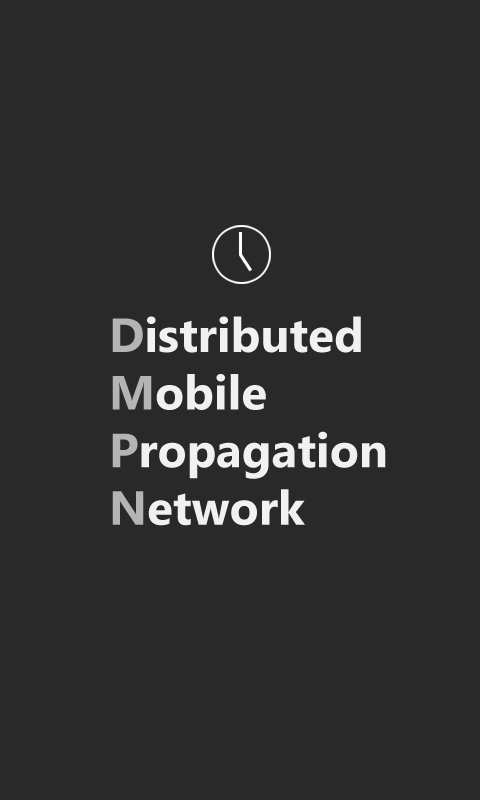
<style>
.page{position:relative;width:480px;height:800px;background:#292929}
.page>*{position:absolute;margin:0}
.t1{font:48px "SegoeUI-Bold";color:#f2f1f1}
.t2{font:48px "SegoeUI-Bold";color:#b4b4b4}
</style>
<div class="page">
<p class="t1" style="left:112px;top:316px;width:274px;height:210px"><span class="t2">D</span>istributed<br><span class="t2">M</span>obile<br><span class="t2">P</span>ropagation<br><span class="t2">N</span>etwork</p>
</div>
